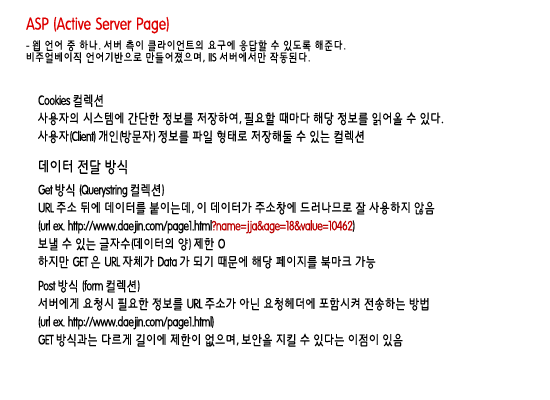
<style>
.page{position:relative;width:550px;height:400px;background:#ffffff}
.page>*{position:absolute;margin:0}
.t1{font:12px/12px "HYkanM";letter-spacing:-0.01em;color:#000000;scale:0.8 1}
.t2{font:18px/24px "HYkanM";letter-spacing:-0.01em;color:#dd0000;scale:0.8 1}
.t3{font:14px/18px "HYkanM";letter-spacing:-0.05em;color:#000000;scale:0.8 1}
.t4{font:16px/24px "HYkanM";letter-spacing:-0.05em;color:#000000;scale:0.8 1}
.t5{font:14px/18px "HYkanM";letter-spacing:-0.05em;color:#ba0000;scale:0.8 1}
.t6{font:14px/24px "HYkanM";letter-spacing:-0.05em;color:#000000;scale:0.8 1}
</style>
<div class="page">
<p class="t1" style="left:26px;top:16px;width:320px;height:48px"><span class="t2">ASP (Active Server Page)<br></span>- 웹 언어 중 하나. 서버 측이 클라이언트의 요구에 응답할 수 있도록 해준다. <br>비주얼베이직 언어기반으로 만들어졌으며, IIS 서버에서만 작동된다.</p>
<p class="t3" style="left:38px;top:94px;width:406px;height:50px">Cookies 컬렉션<br>사용자의 시스템에 간단한 정보를 저장하여, 필요할 때마다 해당 정보를 읽어올 수 있다.<br>사용자(Client) 개인(방문자) 정보를 파일 형태로 저장해둘 수 있는 컬렉션</p>
<p class="t3" style="left:38px;top:160px;width:397px;height:187px"><span class="t4">데이터 전달 방식<br></span>Get 방식 (Querystring 컬렉션)<br>URL 주소 뒤에 데이터를 붙이는데, 이 데이터가 주소창에 드러나므로 잘 사용하지 않음<br>(url ex. http://www.daejin.com/page1.html<span class="t5">?name=jja&amp;age=18&amp;value=10462</span>)<br>보낼 수 있는 글자수(데이터의 양) 제한 O<br><span class="t6">하지만 GET 은 URL 자체가 Data 가 되기 때문에 해당 페이지를 북마크 가능<br></span>Post 방식 (form 컬렉션)<br>서버에게 요청시 필요한 정보를 URL 주소가 아닌 요청헤더에 포함시켜 전송하는 방법<br>(url ex. http://www.daejin.com/page1.html)<br>GET 방식과는 다르게 길이에 제한이 없으며, 보안을 지킬 수 있다는 이점이 있음</p>
</div>
